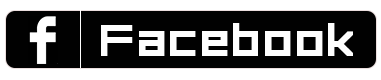
<style>
.page{position:relative;width:381px;height:80px;background:#010101}
.page>*{position:absolute;margin:0}
.t1{font:60px "FORCED-SQUARE";color:#fefefe}
</style>
<div class="page">
<p class="t1" style="left:101px;top:23px;width:252px;height:33px">Facebook</p>
</div>
